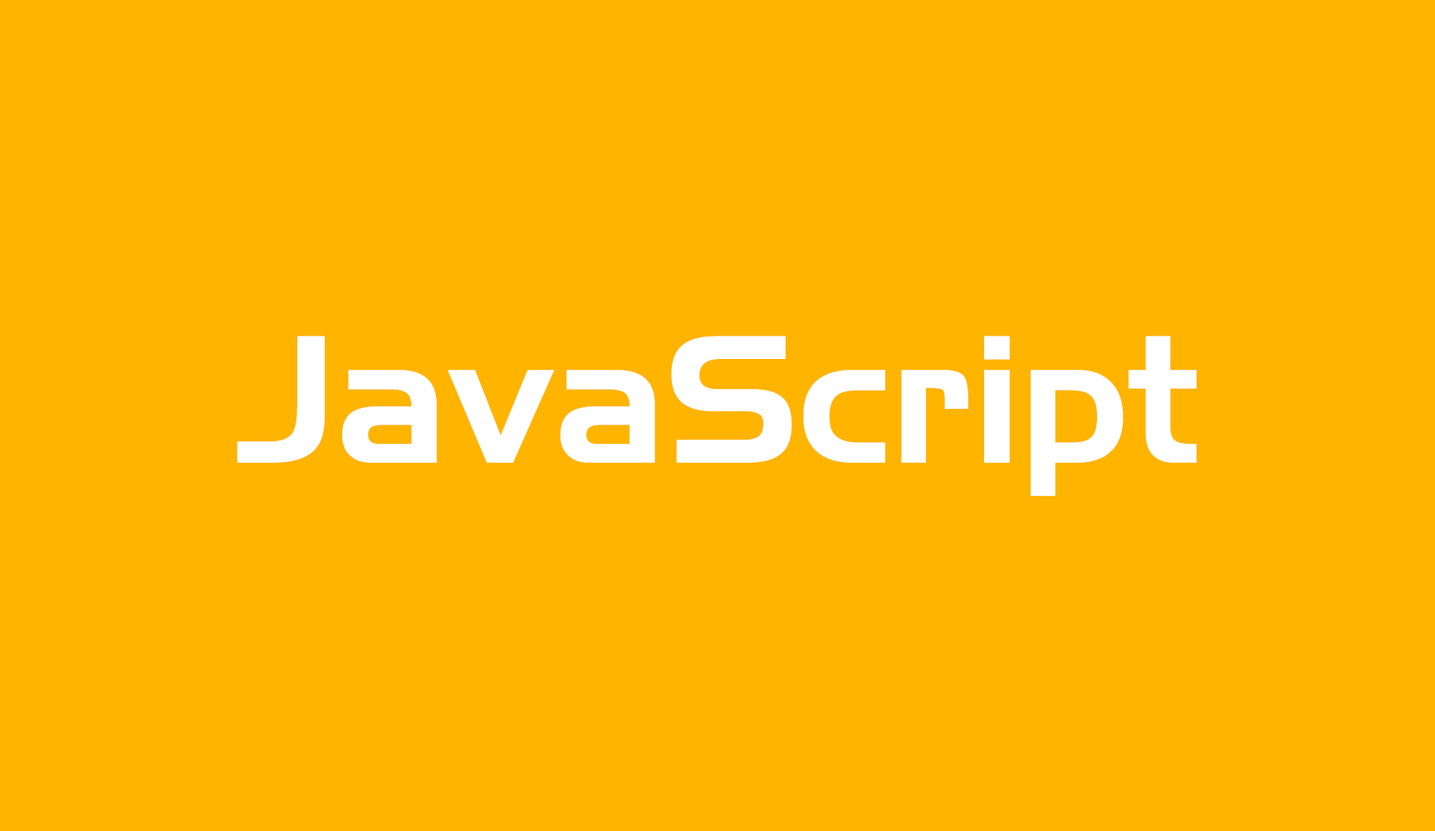
<style>
.page{position:relative;width:1435px;height:831px;background:#ffb400}
.page>*{position:absolute;margin:0}
.t1{font:175.3px "AeroRegularSWFTE";color:#ffffff}
</style>
<div class="page">
<p class="t1" style="left:237px;top:336px;width:960px;height:160px">JavaScript</p>
</div>
